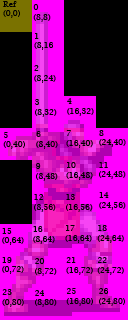
<style>
.page{position:relative;width:128px;height:320px;background:#000000}
.page>*{position:absolute;margin:0}
.t1{font:8px "LucidaBright";color:#000000}
</style>
<div class="page">
<p class="t1" style="left:3px;top:1px;width:17px;height:17px;text-align:justify">Ref<br>(0,0)</p>
<p class="t1" style="left:33px;top:4px;width:18px;height:18px;text-align:justify">0<br>(8,8)</p>
<p class="t1" style="left:34px;top:33px;width:19px;height:17px;text-align:justify">1<br>(8,16</p>
<p class="t1" style="left:34px;top:65px;width:22px;height:18px;text-align:justify">2<br>(8,24)</p>
<p class="t1" style="left:35px;top:99px;width:22px;height:18px;text-align:justify">3<br>(8,32)</p>
<p class="t1" style="left:67px;top:98px;width:27px;height:18px;text-align:justify">4<br>(16,32)</p>
<p class="t1" style="left:3px;top:132px;width:22px;height:17px;text-align:justify">5<br>(0,40)</p>
<p class="t1" style="left:36px;top:131px;width:22px;height:18px;text-align:justify">6<br>(8,40)</p>
<p class="t1" style="left:66px;top:130px;width:27px;height:18px;text-align:justify">7<br>(16,40)</p>
<p class="t1" style="left:99px;top:130px;width:27px;height:17px;text-align:justify">8<br>(24,40)</p>
<p class="t1" style="left:36px;top:163px;width:22px;height:18px;text-align:justify">9<br>(8,48)</p>
<p class="t1" style="left:66px;top:162px;width:27px;height:18px;text-align:justify">10<br>(16,48)</p>
<p class="t1" style="left:99px;top:162px;width:27px;height:17px;text-align:justify">11<br>(24,48)</p>
<p class="t1" style="left:34px;top:194px;width:22px;height:18px;text-align:justify">12<br>(8,56)</p>
<p class="t1" style="left:66px;top:194px;width:27px;height:18px;text-align:justify">13<br>(16,56)</p>
<p class="t1" style="left:99px;top:192px;width:27px;height:18px;text-align:justify">14<br>(24,56)</p>
<p class="t1" style="left:2px;top:228px;width:22px;height:17px;text-align:justify">15<br>(0,64)</p>
<p class="t1" style="left:33px;top:226px;width:22px;height:18px;text-align:justify">16<br>(8,64)</p>
<p class="t1" style="left:65px;top:225px;width:27px;height:18px;text-align:justify">17<br>(16,64)</p>
<p class="t1" style="left:97px;top:225px;width:27px;height:18px;text-align:justify">18<br>(24,64)</p>
<p class="t1" style="left:2px;top:257px;width:22px;height:17px;text-align:justify">19<br>(0,72)</p>
<p class="t1" style="left:66px;top:257px;width:27px;height:18px;text-align:justify">21<br>(16,72)</p>
<p class="t1" style="left:97px;top:257px;width:27px;height:18px;text-align:justify">22<br>(24,72)</p>
<p class="t1" style="left:35px;top:258px;width:22px;height:18px;text-align:justify">20<br>(8,72)</p>
<p class="t1" style="left:2px;top:289px;width:22px;height:18px;text-align:justify">23<br>(0,80)</p>
<p class="t1" style="left:35px;top:290px;width:22px;height:17px;text-align:justify">24<br>(8,80)</p>
<p class="t1" style="left:66px;top:288px;width:27px;height:18px;text-align:justify">25<br>(16,80)</p>
<p class="t1" style="left:99px;top:288px;width:26px;height:18px;text-align:justify">26<br>(24,80)</p>
</div>
